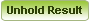
<style>
.page{position:relative;width:90px;height:21px}
.page>*{position:absolute;margin:0}
.t1{font:11px "Arial-BoldMT";color:#2e4107}
</style>
<div class="page">
<p class="t1" style="left:7px;top:6px;width:75px;height:8px">Unhold Result</p>
</div>
